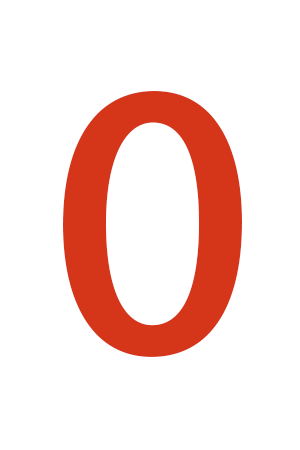
<style>
.page{position:relative;width:300px;height:450px;background:#ffffff}
.page>*{position:absolute;margin:0}
.t1{font:342.7px "AdobeFanHeitiStd-Bold";color:#d53518;scale:1.07 1}
</style>
<div class="page">
<p class="t1" style="left:63px;top:91px;width:179px;height:266px">0</p>
</div>
